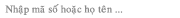
<style>
.page{position:relative;width:180px;height:18px;background:#ffffff}
.page>*{position:absolute;margin:0}
.t1{font:10.4px "VNI-Times";letter-spacing:0.005em;color:#8a8a8a}
</style>
<div class="page">
<p class="t1" style="left:5px;top:4px;width:118px;height:11px">Nhaäp maõ soá hoaëc hoï teân ...</p>
</div>
